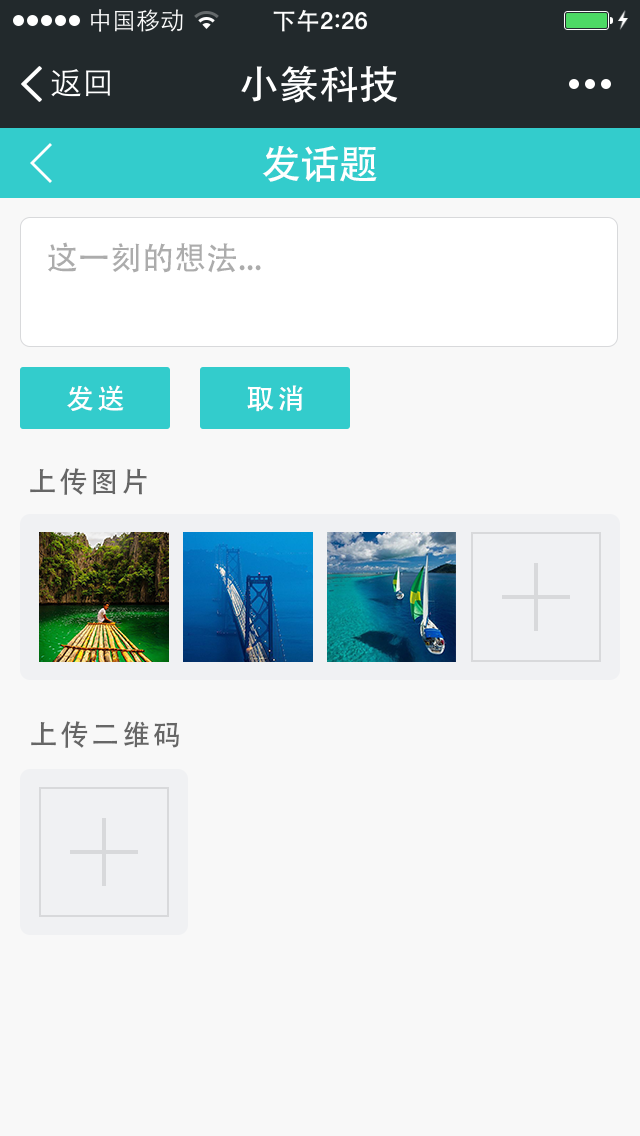
<style>
.page{position:relative;width:640px;height:1136px;background:#f8f8f8}
.page>*{position:absolute;margin:0}
.t1{font:40px "AdobeHeitiStd-Regular";color:#ffffff}
.t2{font:32px "AdobeHeitiStd-Regular";color:#acacac}
.t3{font:28px "AdobeHeitiStd-Regular";letter-spacing:0.1em;color:#ffffff}
.t4{font:28px "AdobeHeitiStd-Regular";letter-spacing:0.1em;color:#666666}
</style>
<div class="page">
<p class="t1" style="left:262px;top:145px;width:115px;height:37px">发话题</p>
<p class="t2" style="left:48px;top:242px;width:213px;height:31px">这一刻的想法...</p>
<p class="t3" style="left:67px;top:385px;width:57px;height:26px">发送</p>
<p class="t3" style="left:247px;top:385px;width:56px;height:27px">取消</p>
<p class="t4" style="left:30px;top:468px;width:117px;height:27px">上传图片</p>
<p class="t4" style="left:31px;top:721px;width:148px;height:27px">上传二维码</p>
</div>
